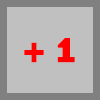
<style>
.page{position:relative;width:100px;height:100px;background:#c0c0c0}
.page>*{position:absolute;margin:0}
.t1{font:24px "MINE-SWEEPER";color:#ff0000}
</style>
<div class="page">
<p class="t1" style="left:24px;top:38px;width:51px;height:25px">+ 1</p>
</div>
